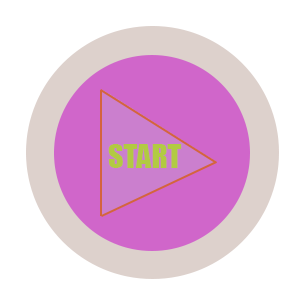
<style>
.page{position:relative;width:300px;height:300px;background:#ffffff}
.page>*{position:absolute;margin:0}
.t1{font:30px "Impact";color:#b2ca42}
</style>
<div class="page">
<p class="t1" style="left:108px;top:144px;width:74px;height:24px">START</p>
</div>
